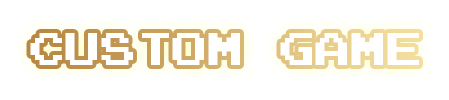
<style>
.page{position:relative;width:449px;height:100px;background:#ffffff}
.page>*{position:absolute;margin:0}
.t1{font:35.8px "Emulogic";color:#ffffff}
</style>
<div class="page">
<p class="t1" style="left:30px;top:33px;width:389px;height:32px">custom game</p>
</div>
